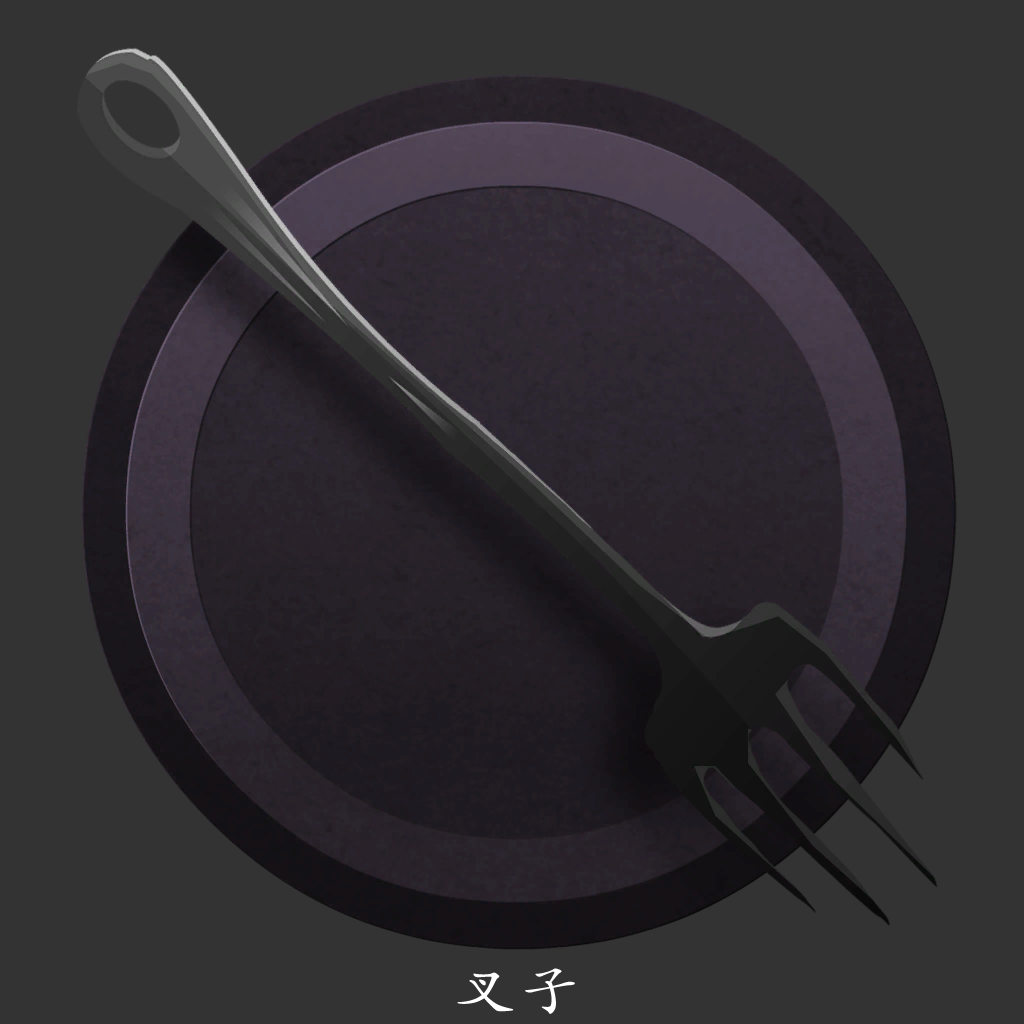
<style>
.page{position:relative;width:1024px;height:1024px;background:#333333}
.page>*{position:absolute;margin:0}
.t1{font:53.3px "STKaiti";letter-spacing:0.1em;color:#ffffff}
</style>
<div class="page">
<p class="t1" style="left:457px;top:968px;width:118px;height:46px">叉子</p>
</div>
